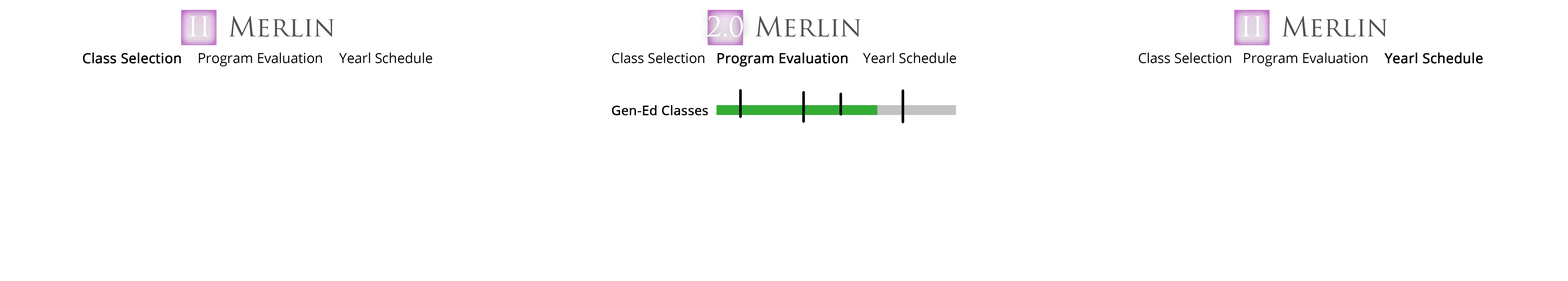
<style>
.page{position:relative;width:1568px;height:281px;background:#ffffff}
.page>*{position:absolute;margin:0}
.t1{font:26.8px "TrajanPro-Regular";color:#ffffff}
.t2{font:26.8px "TrajanPro-Regular";color:#515151}
.t3{font:13.7px "OpenSans-Regular";color:#000000}
.t4{font:13.7px "OpenSans-Regular";color:#000000;font-weight:bold}
.t5{font:13px "OpenSans-Regular";color:#000000;font-weight:bold}
</style>
<div class="page">
<p class="t1" style="left:190px;top:16px;width:19px;height:20px">II</p>
<p class="t2" style="left:229px;top:16px;width:105px;height:21px">Merlin</p>
<p class="t1" style="left:707px;top:16px;width:36px;height:21px">2.0</p>
<p class="t2" style="left:756px;top:16px;width:104px;height:21px">Merlin</p>
<p class="t1" style="left:1243px;top:16px;width:18px;height:20px">II</p>
<p class="t2" style="left:1282px;top:16px;width:105px;height:21px">Merlin</p>
<p class="t3" style="left:83px;top:53px;width:349px;height:13px"><span class="t4">Class Selection</span>   Program Evaluation    Yearl Schedule</p>
<p class="t4" style="left:612px;top:53px;width:344px;height:14px"><span class="t3">Class Selection   </span>Program Evaluation <span class="t3">   Yearl Schedule</span></p>
<p class="t3" style="left:1139px;top:53px;width:344px;height:13px">Class Selection   Program Evaluation    <span class="t4">Yearl Schedule</span></p>
<p class="t5" style="left:612px;top:105px;width:96px;height:10px">Gen-Ed Classes</p>
</div>
